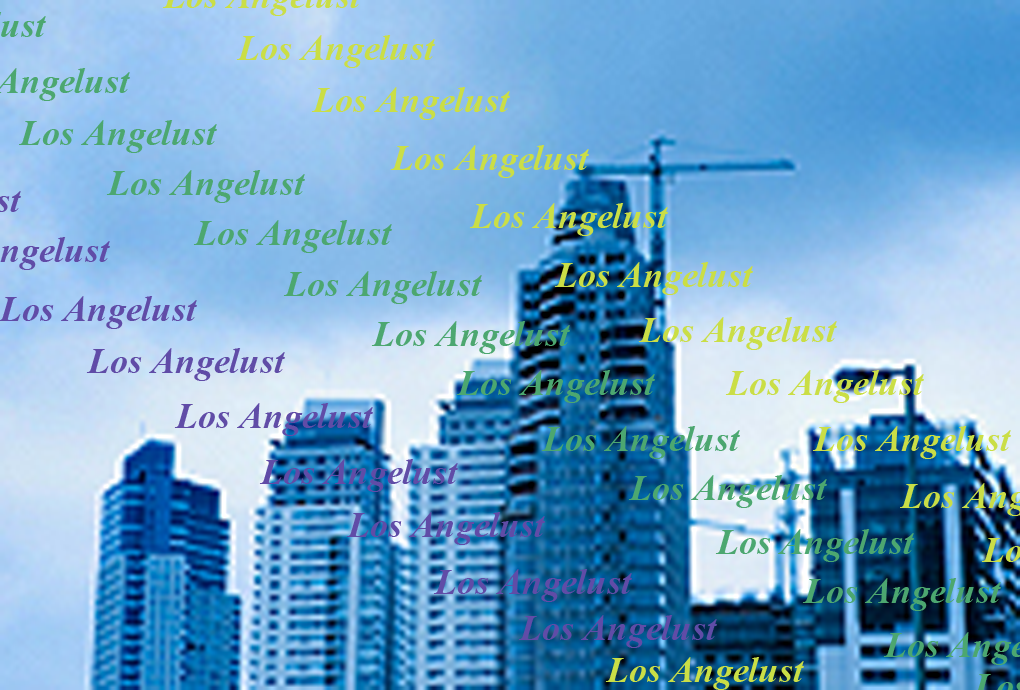
<style>
.page{position:relative;width:1020px;height:690px}
.page>*{position:absolute;margin:0}
.t1{font:36px "TimesNewRomanPS-BoldItalicMT";color:#cade46}
.t2{font:36px "TimesNewRomanPS-BoldItalicMT";color:#4ca770}
.t3{font:36px "TimesNewRomanPS-BoldItalicMT";color:#604ca7}
</style>
<div class="page">
<p class="t1" style="left:236px;top:35px;width:199px;height:33px">Los Angelust</p>
<p class="t1" style="left:311px;top:87px;width:199px;height:33px">Los Angelust</p>
<p class="t2" style="left:19px;top:120px;width:198px;height:33px">Los Angelust</p>
<p class="t1" style="left:390px;top:145px;width:199px;height:33px">Los Angelust</p>
<p class="t2" style="left:106px;top:170px;width:199px;height:33px">Los Angelust</p>
<p class="t1" style="left:469px;top:203px;width:199px;height:33px">Los Angelust</p>
<p class="t2" style="left:193px;top:220px;width:199px;height:33px">Los Angelust</p>
<p class="t1" style="left:554px;top:262px;width:199px;height:33px">Los Angelust</p>
<p class="t2" style="left:283px;top:271px;width:199px;height:33px">Los Angelust</p>
<p class="t3" style="left:0px;top:296px;width:197px;height:33px">Los Angelust</p>
<p class="t1" style="left:638px;top:317px;width:199px;height:33px">Los Angelust</p>
<p class="t2" style="left:371px;top:321px;width:199px;height:33px">Los Angelust</p>
<p class="t3" style="left:86px;top:348px;width:199px;height:33px">Los Angelust</p>
<p class="t2" style="left:456px;top:370px;width:199px;height:33px">Los Angelust</p>
<p class="t1" style="left:725px;top:370px;width:199px;height:33px">Los Angelust</p>
<p class="t3" style="left:174px;top:403px;width:199px;height:33px">Los Angelust</p>
<p class="t2" style="left:541px;top:426px;width:199px;height:33px">Los Angelust</p>
<p class="t1" style="left:812px;top:426px;width:199px;height:33px">Los Angelust</p>
<p class="t3" style="left:259px;top:459px;width:199px;height:33px">Los Angelust</p>
<p class="t2" style="left:628px;top:475px;width:199px;height:33px">Los Angelust</p>
<p class="t3" style="left:346px;top:512px;width:199px;height:33px">Los Angelust</p>
<p class="t2" style="left:715px;top:529px;width:199px;height:33px">Los Angelust</p>
<p class="t3" style="left:433px;top:569px;width:199px;height:33px">Los Angelust</p>
<p class="t2" style="left:802px;top:578px;width:199px;height:33px">Los Angelust</p>
<p class="t3" style="left:518px;top:615px;width:199px;height:33px">Los Angelust</p>
<p class="t1" style="left:605px;top:657px;width:199px;height:33px">Los Angelust</p>
</div>
